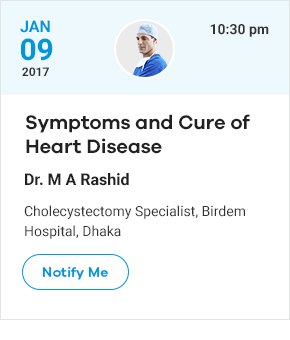
<style>
.page{position:relative;width:290px;height:340px;background:#ffffff}
.page>*{position:absolute;margin:0}
.t1{font:16px "Roboto-Bold";color:#0097db}
.t2{font:14px "Roboto-Bold";color:#333333}
.t3{font:30px "Roboto-Bold";color:#0097db}
.t4{font:12px "Roboto-Bold";color:#333333}
.t5{font:20px "GalanoGrotesque-SemiBold";color:#212121}
.t6{font:16px "Roboto-Bold";color:#212121}
.t7{font:14px/20px "Roboto-Regular";color:#333333}
.t8{font:14px "GalanoGrotesque-SemiBold";color:#0097db}
</style>
<div class="page">
<p class="t1" style="left:20px;top:20px;width:30px;height:13px">JAN</p>
<p class="t2" style="left:210px;top:24px;width:59px;height:13px">10:30 pm</p>
<p class="t3" style="left:21px;top:38px;width:32px;height:23px">09</p>
<p class="t4" style="left:22px;top:67px;width:27px;height:9px">2017</p>
<p class="t5" style="left:26px;top:114px;width:224px;height:40px">Symptoms and Cure of Heart Disease</p>
<p class="t6" style="left:25px;top:173px;width:104px;height:13px">Dr. M A Rashid</p>
<p class="t7" style="left:24px;top:205px;width:221px;height:34px">Cholecystectomy Specialist, Birdem Hospital, Dhaka</p>
<p class="t8" style="left:42px;top:266px;width:66px;height:14px">Notify Me</p>
</div>
